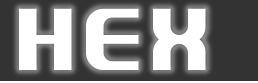
<style>
.page{position:relative;width:258px;height:83px;background:#ffffff}
.page>*{position:absolute;margin:0}
.t1{font:139.9px "Quantifier-NBP";letter-spacing:0.042em;color:#ffffff}
</style>
<div class="page">
<p class="t1" style="left:19px;top:8px;width:187px;height:62px">HEX</p>
</div>
